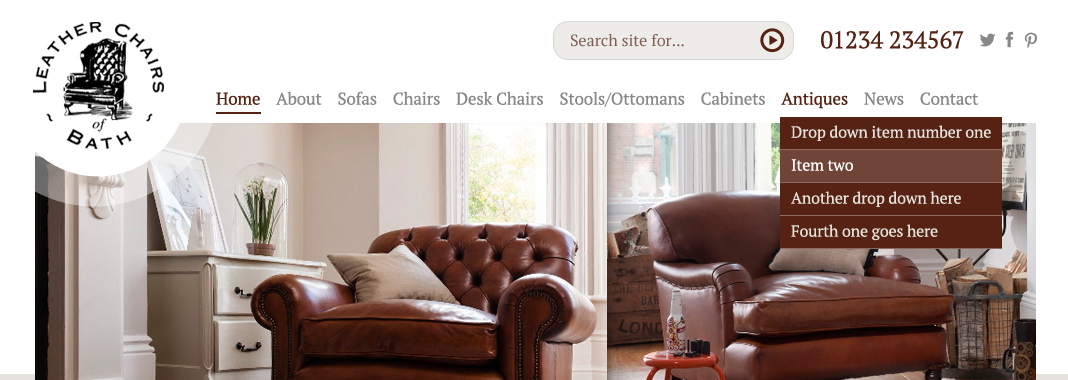
<style>
.page{position:relative;width:1068px;height:380px;background:#ffffff}
.page>*{position:absolute;margin:0}
.t1{font:17px "PTSerif-Regular";letter-spacing:-0.01em;color:#888888}
.t2{font:17px "PTSerif-Regular";letter-spacing:-0.01em;color:#552213}
.t3{font:16px/33px "PTSerif-Regular";letter-spacing:-0.01em;color:#e5e1dc}
.t4{font:16px/33px "PTSerif-Regular";letter-spacing:-0.01em;color:#ffffff}
</style>
<div class="page">
<p class="t1" style="left:216px;top:91px;width:763px;height:18px"><span class="t2">Home    </span>About    Sofas    Chairs    Desk Chairs    Stools/Ottomans    Cabinets    <span class="t2">Antiques    </span>News    Contact</p>
<p class="t3" style="left:791px;top:125px;width:200px;height:116px">Drop down item number one<br><span class="t4">Item two<br></span>Another drop down here<br>Fourth one goes here</p>
</div>
